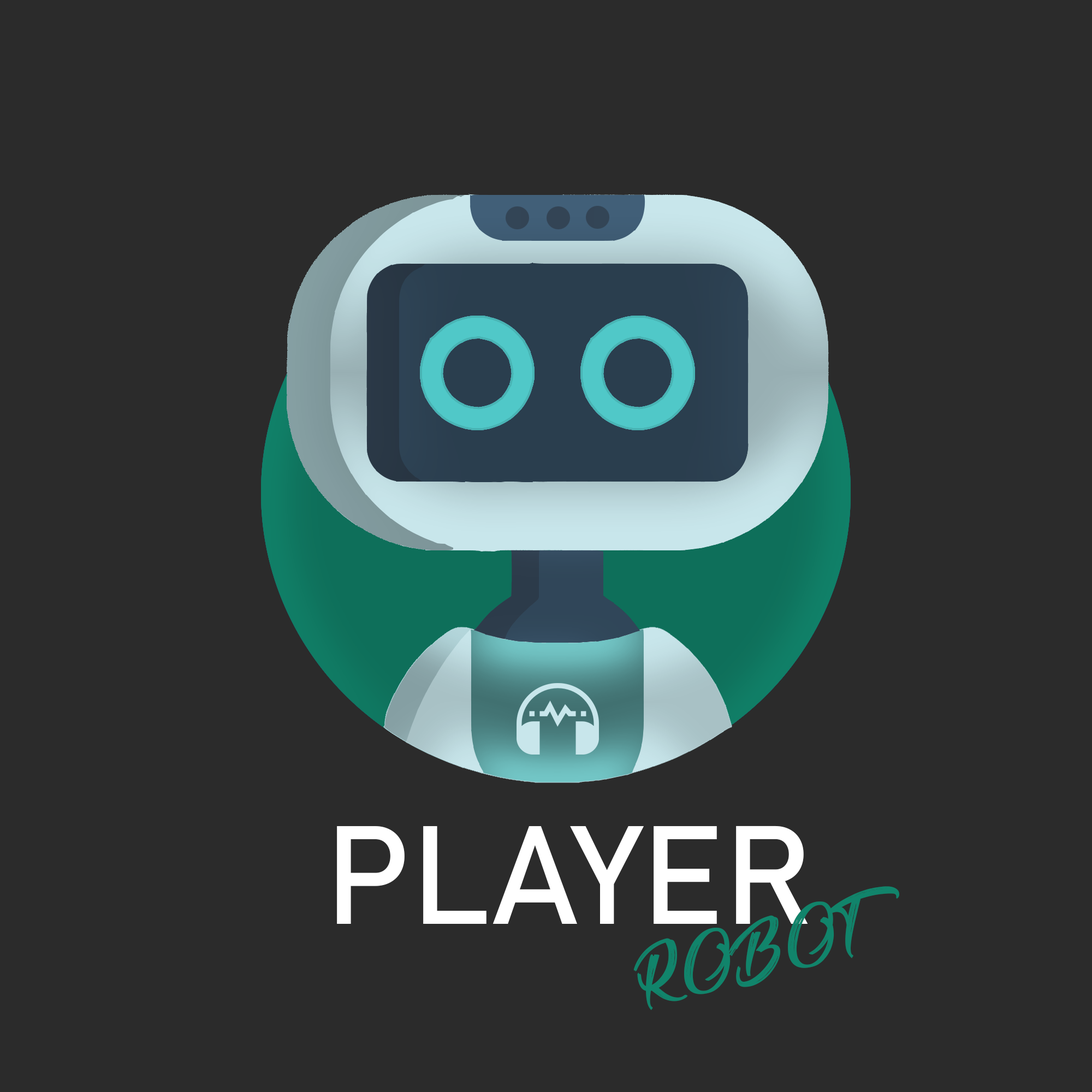
<style>
.page{position:relative;width:1092px;height:1092px;background:#2b2b2b}
.page>*{position:absolute;margin:0}
.t1{font:137.9px "Bahnschrift";color:#ffffff}
.t2{font:65.5px "Barbershop-in-Thailand";color:#11846b}
</style>
<div class="page">
<p class="t1" style="left:337px;top:826px;width:471px;height:98px">PLAYER</p>
<p class="t2" style="left:633px;top:886px;width:266px;height:124px;rotate:-14deg">ROBOT</p>
</div>
